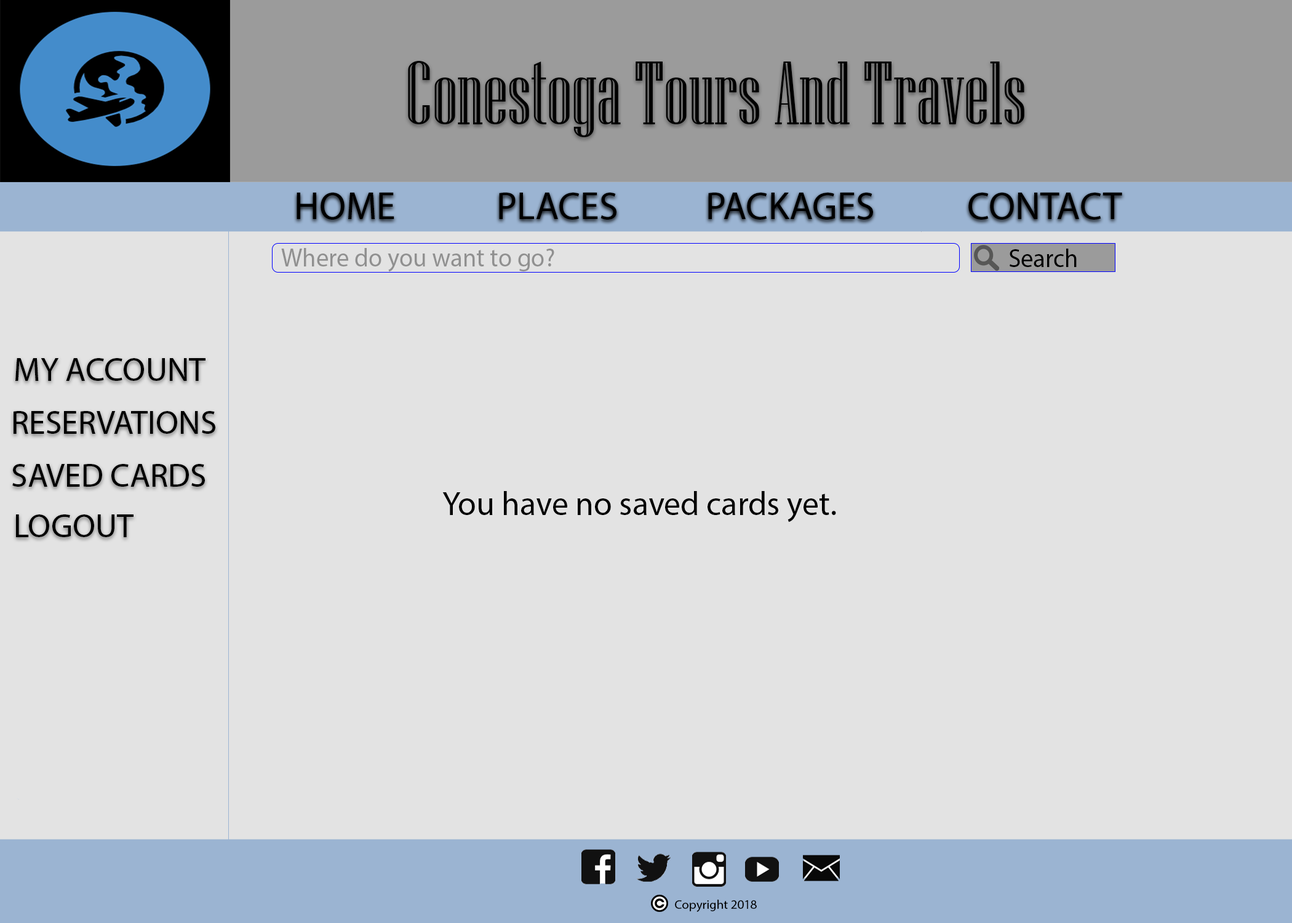
<style>
.page{position:relative;width:1292px;height:923px;background:#e3e3e3}
.page>*{position:absolute;margin:0}
.t1{font:90px "NiagaraEngraved-Reg";color:#000000}
.t2{font:38.6px "MyriadPro-Regular";color:#000000}
.t3{font:25.6px "MyriadPro-Regular";color:#909090}
.t4{font:25.6px "MyriadPro-Regular";color:#000000}
.t5{font:33.3px "MyriadPro-Regular";color:#000000}
.t6{font:12.8px "MyriadPro-Regular";color:#000000}
</style>
<div class="page">
<p class="t1" style="left:408px;top:61px;width:616px;height:76px">Conestoga Tours And Travels</p>
<p class="t2" style="left:297px;top:193px;width:97px;height:27px">HOME</p>
<p class="t2" style="left:499px;top:193px;width:117px;height:27px">PLACES</p>
<p class="t2" style="left:708px;top:193px;width:165px;height:27px">PACKAGES</p>
<p class="t2" style="left:968px;top:193px;width:154px;height:27px">CONTACT</p>
<p class="t3" style="left:281px;top:248px;width:273px;height:24px">Where do you want to go?</p>
<p class="t4" style="left:1010px;top:249px;width:67px;height:18px">Search</p>
<p class="t5" style="left:15px;top:358px;width:190px;height:23px">MY ACCOUNT</p>
<p class="t5" style="left:14px;top:411px;width:201px;height:23px">RESERVATIONS</p>
<p class="t5" style="left:12px;top:464px;width:193px;height:23px">SAVED CARDS</p>
<p class="t5" style="left:442px;top:491px;width:394px;height:31px">You have no saved cards yet.</p>
<p class="t5" style="left:16px;top:514px;width:118px;height:23px">LOGOUT</p>
<p class="t6" style="left:675px;top:900px;width:82px;height:12px">Copyright 2018</p>
</div>
